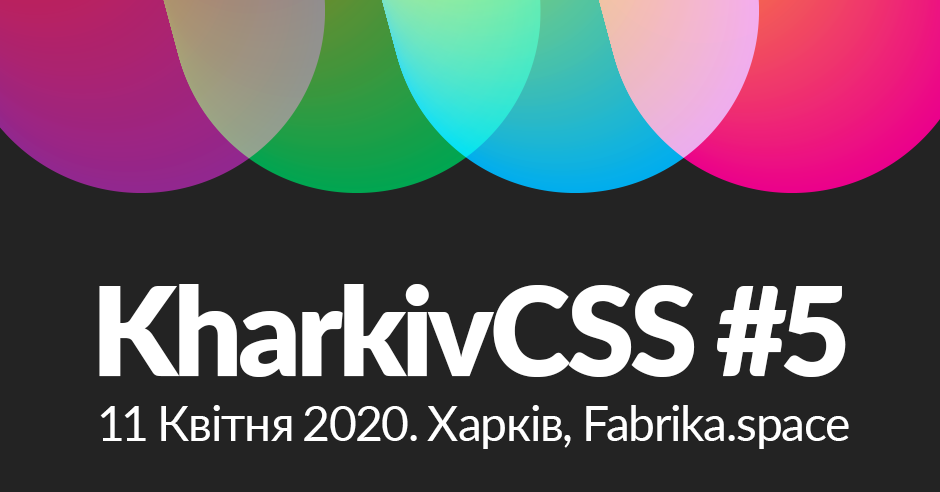
<style>
.page{position:relative;width:940px;height:492px;background:#232323}
.page>*{position:absolute;margin:0}
.t1{font:122.6px "Lato-Black";letter-spacing:-0.04em;color:#ffffff}
.t2{font:47.8px "Lato-Regular";letter-spacing:-0.04em;color:#ffffff}
</style>
<div class="page">
<p class="t1" style="left:99px;top:284px;width:747px;height:93px">KharkivCSS #5</p>
<p class="t2" style="left:100px;top:405px;width:749px;height:44px">11 Квiтня 2020. Харкiв, Fabrika.space</p>
</div>
